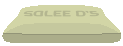
<style>
.page{position:relative;width:123px;height:46px;background:#ffffff}
.page>*{position:absolute;margin:0}
.t1{font:7.1px "RussoOne-Regular";color:#abad8a;scale:1.78 1}
</style>
<div class="page">
<p class="t1" style="left:23px;top:10px;width:76px;height:7px;opacity:0.79">SOLEE O’S</p>
<p class="t1" style="left:23px;top:10px;width:76px;height:7px;opacity:0.79">SOLEE O’S</p>
</div>
